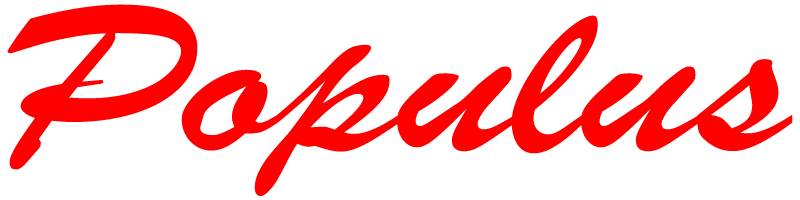
<style>
.page{position:relative;width:800px;height:200px;background:#ffffff}
.page>*{position:absolute;margin:0}
.t1{font:228.9px "BrushScriptMT";color:#ff0000;scale:1.31 1}
</style>
<div class="page">
<p class="t1" style="left:7px;top:4px;width:786px;height:192px">Populus</p>
</div>
